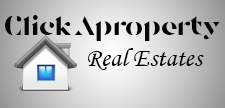
<style>
.page{position:relative;width:225px;height:108px}
.page>*{position:absolute;margin:0}
.t1{font:25px "Tostada";color:#060606}
.t2{font:26px "MonotypeCorsiva";color:#060606}
</style>
<div class="page">
<p class="t1" style="left:5px;top:15px;width:215px;height:26px">ClickAproperty</p>
<p class="t2" style="left:87px;top:48px;width:117px;height:22px">Real Estates</p>
</div>
